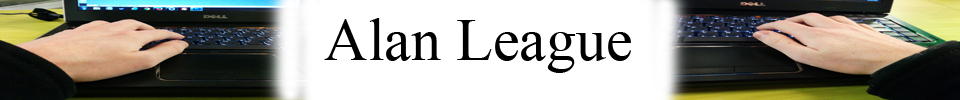
<style>
.page{position:relative;width:960px;height:100px;background:#ffffff}
.page>*{position:absolute;margin:0}
.t1{font:60px "TimesNewRomanPSMT";color:#010000}
</style>
<div class="page">
<p class="t1" style="left:324px;top:18px;width:307px;height:55px">Alan League</p>
</div>
